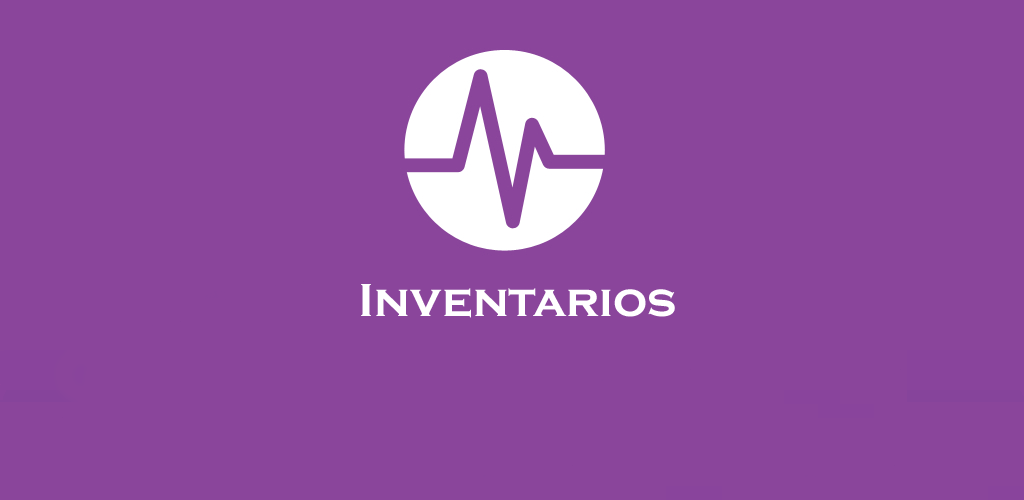
<style>
.page{position:relative;width:1024px;height:500px;background:#8a459b}
.page>*{position:absolute;margin:0}
.t1{font:48px "CopperplateGothic-Bold";color:#ffffff}
</style>
<div class="page">
<p class="t1" style="left:361px;top:284px;width:314px;height:34px">Inventarios</p>
</div>
